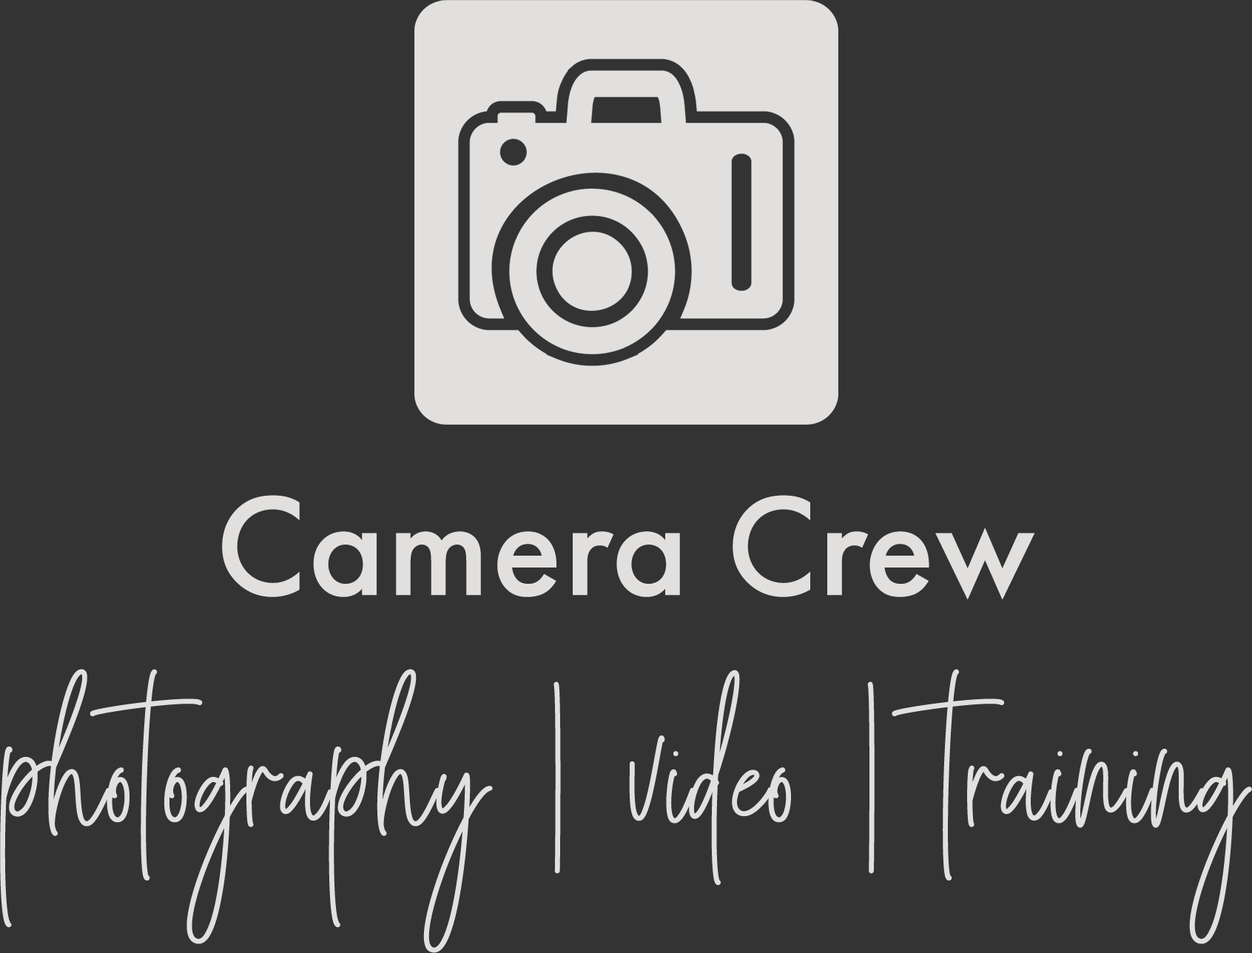
<style>
.page{position:relative;width:1252px;height:953px;background:#333333}
.page>*{position:absolute;margin:0}
.t1{font:146.8px "FuturaPT-Medium";letter-spacing:0.01em;color:#e1e0de}
.t2{font:232.5px "AngelicaJealous";letter-spacing:0.01em;color:#e1e0de}
</style>
<div class="page">
<p class="t1" style="left:222px;top:495px;width:813px;height:105px">Camera Crew</p>
<p class="t2" style="left:0px;top:669px;width:1252px;height:284px">photography | video | training</p>
</div>
